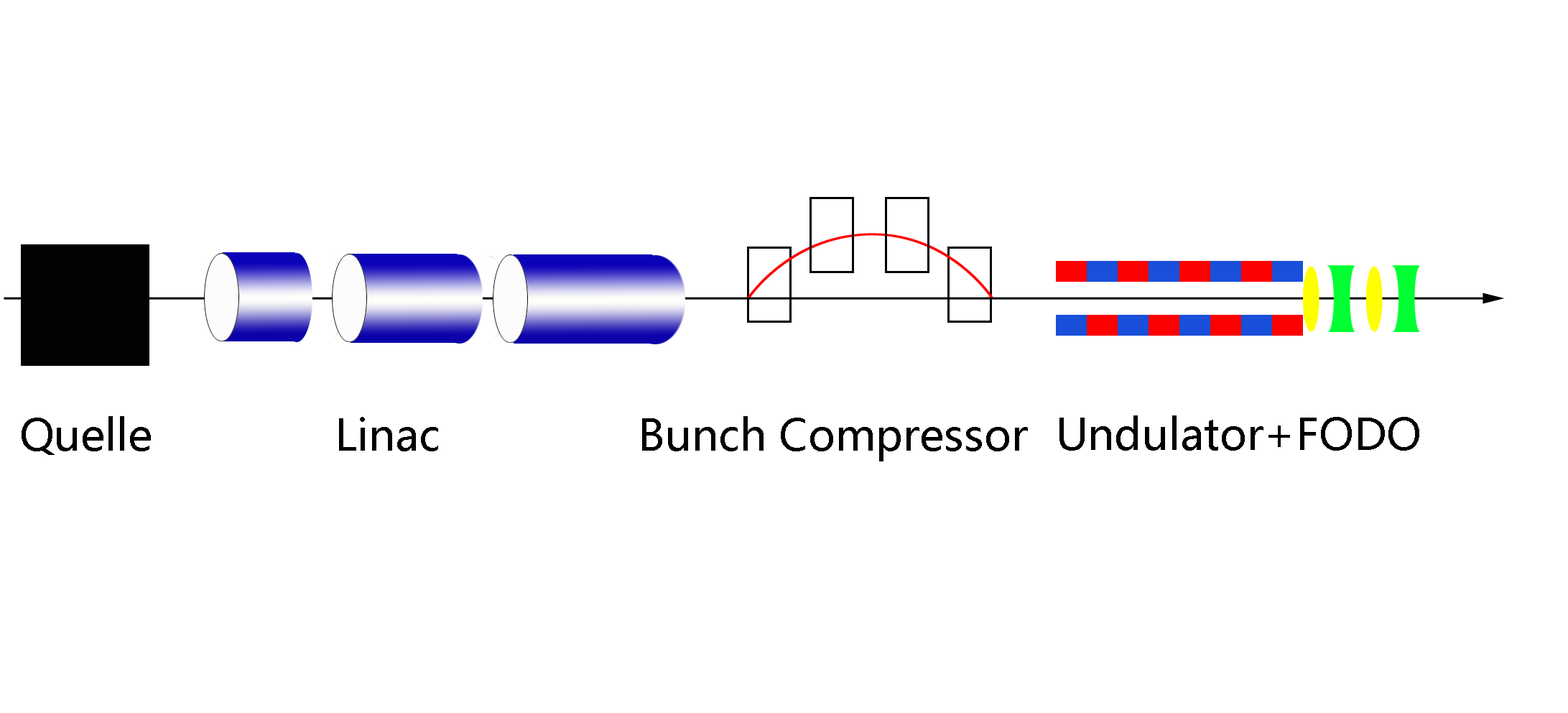
<style>
.page{position:relative;width:1568px;height:713px;background:#ffffff}
.page>*{position:absolute;margin:0}
.t1{font:43.1px "MicrosoftYaHei";color:#000000}
</style>
<div class="page">
<p class="t1" style="left:22px;top:416px;width:129px;height:39px">Quelle</p>
<p class="t1" style="left:339px;top:417px;width:99px;height:34px">Linac</p>
<p class="t1" style="left:642px;top:416px;width:386px;height:45px">Bunch Compressor</p>
<p class="t1" style="left:1059px;top:415px;width:360px;height:35px">Undulator+FODO</p>
</div>
